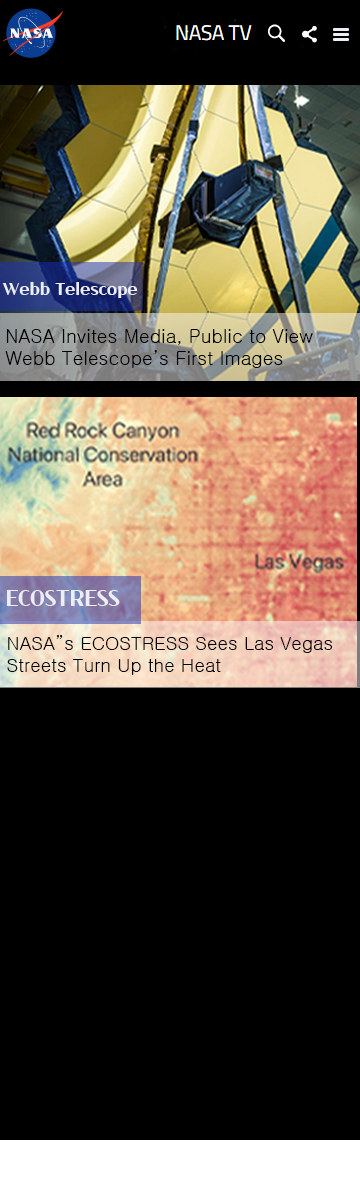
<style>
.page{position:relative;width:360px;height:1200px;background:#000000}
.page>*{position:absolute;margin:0}
.t1{font:17.2px "Cafe24Dangdanghae";color:#eceef5}
.t2{font:18.9px "Gulim";color:#010204}
.t3{font:22.9px "Cafe24Dangdanghae";color:#eceef5}
.t4{font:18.5px "Gulim";color:#010204}
</style>
<div class="page">
<p class="t1" style="left:2px;top:282px;width:136px;height:16px">Webb Telescope</p>
<p class="t2" style="left:5px;top:329px;width:308px;height:39px">NASA Invites Media, Public to View<br>Webb Telescope’s First Images</p>
<p class="t3" style="left:7px;top:590px;width:113px;height:16px">ECOSTRESS</p>
<p class="t4" style="left:7px;top:635px;width:326px;height:40px">NASA”s ECOSTRESS Sees Las Vegas<br>Streets Turn Up the Heat</p>
</div>
